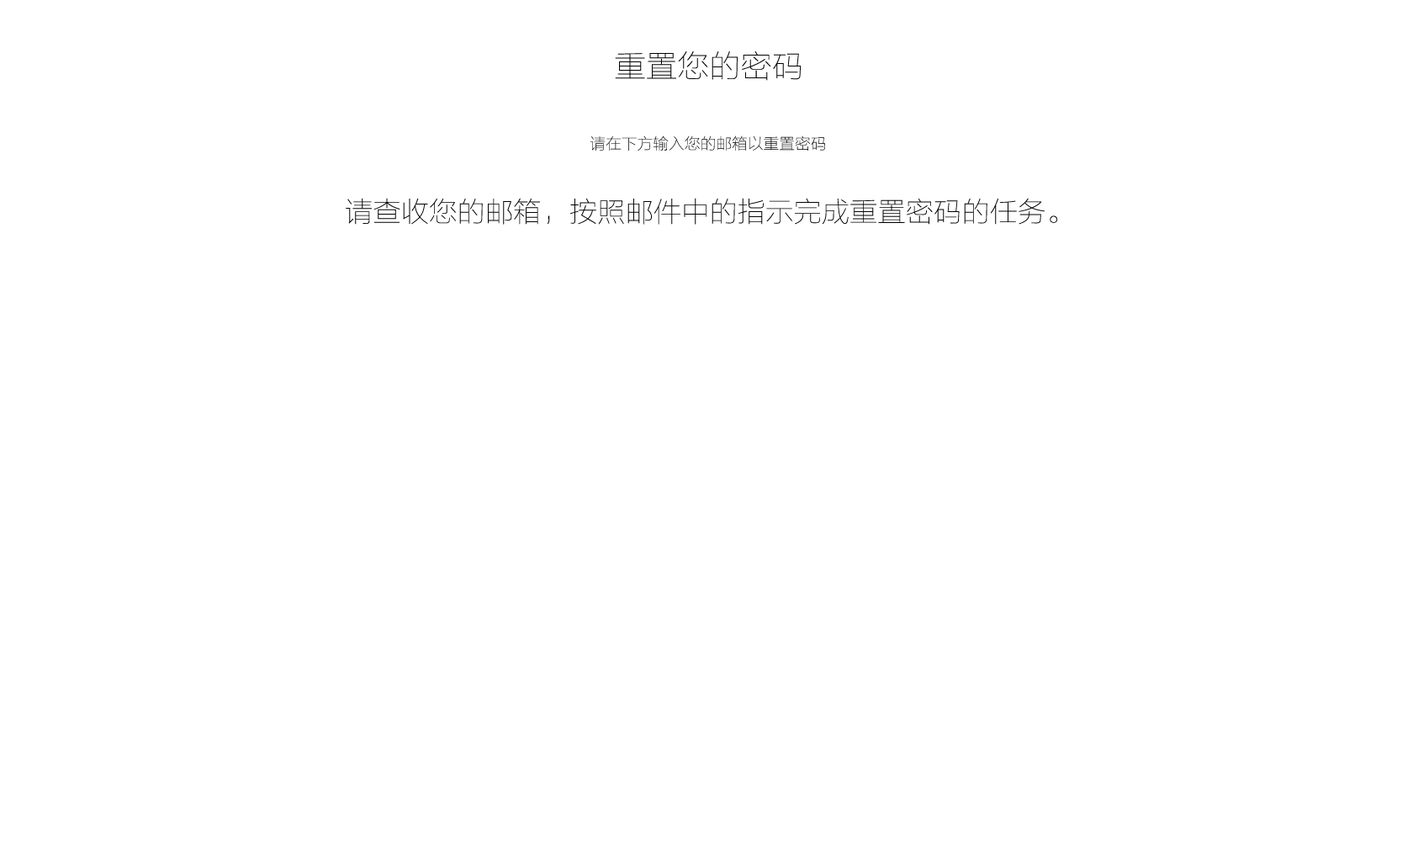
<style>
.page{position:relative;width:1413px;height:844px;background:#ffffff}
.page>*{position:absolute;margin:0}
.t1{font:31.5px "FZLTCXHJW--GB1-0";color:#000000}
.t2{font:15.8px "FZLTCXHJW--GB1-0";color:#000000}
.t3{font:28px "FZLTCXHJW--GB1-0";color:#000000}
</style>
<div class="page">
<p class="t1" style="left:615px;top:51px;width:187px;height:30px">重置您的密码</p>
<p class="t2" style="left:591px;top:135px;width:234px;height:16px">请在下方输入您的邮箱以重置密码</p>
<p class="t3" style="left:346px;top:198px;width:712px;height:27px">请查收您的邮箱，按照邮件中的指示完成重置密码的任务。</p>
</div>
